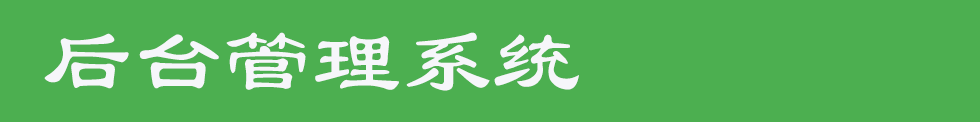
<style>
.page{position:relative;width:980px;height:122px;background:#4caf50}
.page>*{position:absolute;margin:0}
.t1{font:90px "LiSu";color:#f6f6fa}
</style>
<div class="page">
<p class="t1" style="left:44px;top:32px;width:535px;height:59px">后台管理系统</p>
</div>
